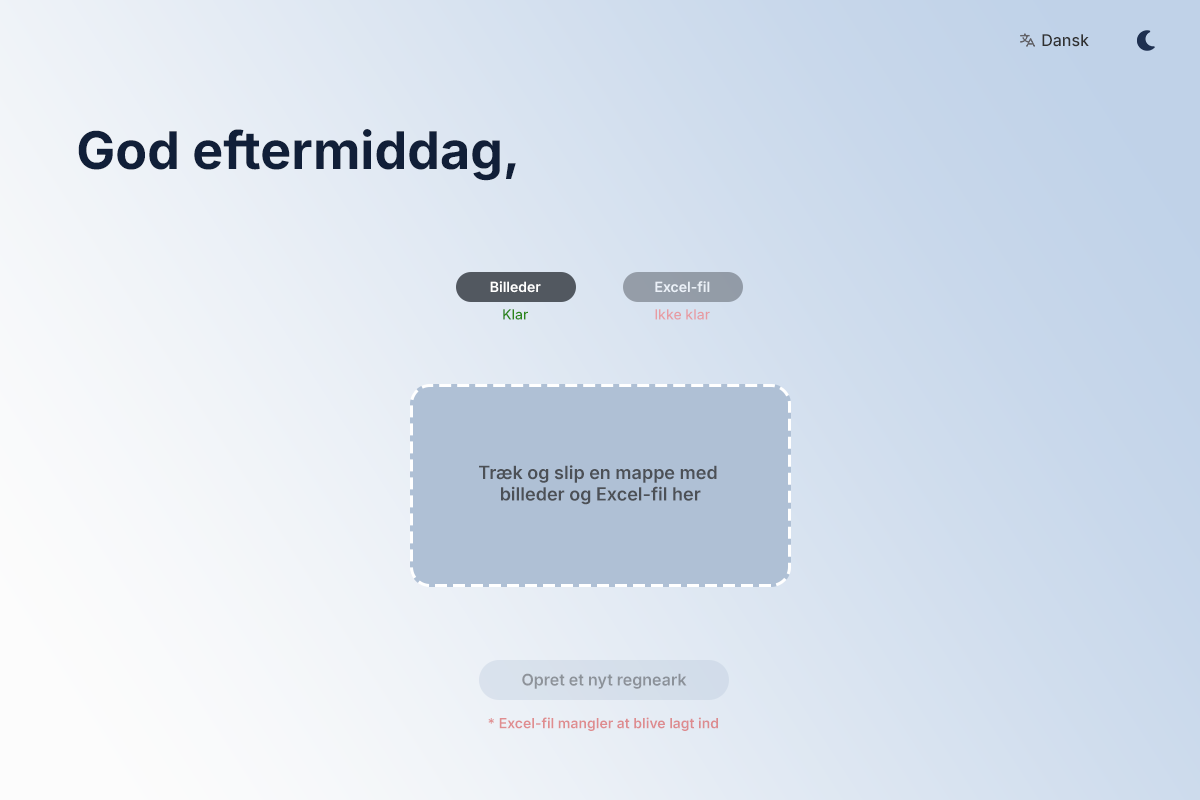
<style>
.page{position:relative;width:1200px;height:800px}
.page>*{position:absolute;margin:0}
.t1{font:16px "Inter-Medium";color:#313131}
.t2{font:52px "Inter-Bold";color:#111f38}
.t3{font:14px "Inter-SemiBold";color:#ffffff}
.t4{font:14px "Inter-Medium";color:#2a8618}
.t5{font:14px "Inter-Medium";color:#e69ba2}
.t6{font:18px "Inter-SemiBold";color:#4c5056}
.t7{font:16px "Inter-SemiBold";color:#8c9299}
.t8{font:14px "Inter-SemiBold";color:#de8c8f}
</style>
<div class="page">
<p class="t1" style="left:1042px;top:34px;width:47px;height:13px">Dansk</p>
<p class="t2" style="left:78px;top:129px;width:438px;height:52px">God eftermiddag,</p>
<p class="t3" style="left:490px;top:281px;width:51px;height:12px">Billeder</p>
<p class="t3" style="left:655px;top:281px;width:55px;height:12px">Excel-fil</p>
<p class="t4" style="left:503px;top:309px;width:25px;height:11px">Klar</p>
<p class="t5" style="left:655px;top:309px;width:55px;height:11px">Ikke klar</p>
<p class="t6" style="left:479px;top:465px;width:238px;height:40px;text-align:center">Træk og slip en mappe med <br>billeder og Excel-fil her</p>
<p class="t7" style="left:522px;top:673px;width:165px;height:16px">Opret et nyt regneark</p>
<p class="t8" style="left:488px;top:717px;width:230px;height:14px">* Excel-fil mangler at blive lagt ind</p>
</div>
